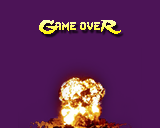
<style>
.page{position:relative;width:160px;height:128px;background:#4c1457}
.page>*{position:absolute;margin:0}
.t1{font:16px "Lady-Radical"}
</style>
<div class="page">
<p class="t1" style="left:39px;top:20px;width:82px;height:14px">Game oveR</p>
</div>
